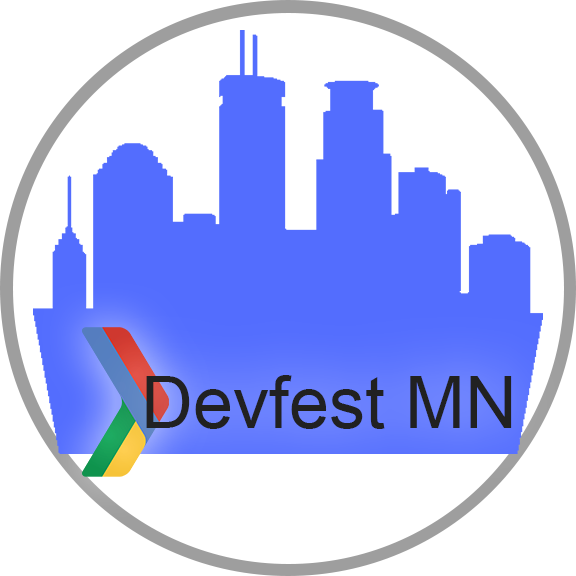
<style>
.page{position:relative;width:576px;height:576px;background:#ffffff}
.page>*{position:absolute;margin:0}
.t1{font:72px "ArialMT";color:#212121}
</style>
<div class="page">
<p class="t1" style="left:146px;top:375px;width:366px;height:54px">Devfest MN</p>
</div>
